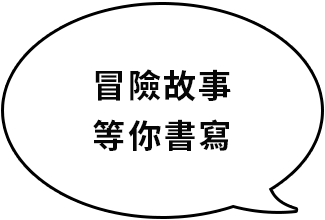
<style>
.page{position:relative;width:325px;height:220px;background:#ffffff}
.page>*{position:absolute;margin:0}
.t1{font:33.3px/50px "NotoSansCJKtc-Bold";letter-spacing:0.06em;color:#060606}
</style>
<div class="page">
<p class="t1" style="left:93px;top:69px;width:138px;height:82px;text-align:center">冒險故事<br>等你書寫</p>
</div>
